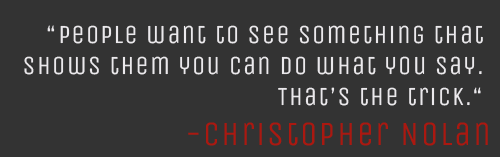
<style>
.page{position:relative;width:500px;height:157px;background:#333333}
.page>*{position:absolute;margin:0}
.t1{font:26px "UnicaOne-Regular";letter-spacing:0.05em;color:#ebe9ec}
.t2{font:34px "UnicaOne-Regular";letter-spacing:0.05em;color:#ab1810}
</style>
<div class="page">
<p class="t1" style="left:24px;top:25px;width:459px;height:81px;text-align:right">“People want to see something that <br>shows them you can do what you say. <br>That’s the trick.“</p>
<p class="t2" style="left:188px;top:122px;width:300px;height:24px">-Christopher Nolan</p>
</div>
